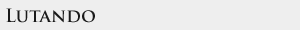
<style>
.page{position:relative;width:300px;height:30px;background:#eeeeee}
.page>*{position:absolute;margin:0}
.t1{font:18px "TrajanPro-Bold";color:#191919}
</style>
<div class="page">
<p class="t1" style="left:6px;top:8px;width:89px;height:15px">Lutando</p>
</div>
